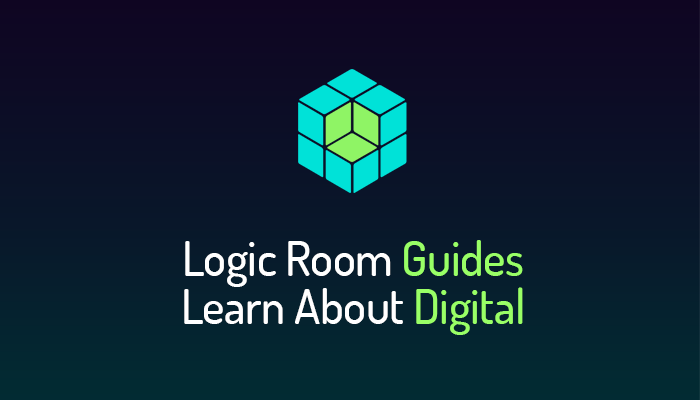
<style>
.page{position:relative;width:700px;height:400px}
.page>*{position:absolute;margin:0}
.t1{font:48px/48px "Dosis-Medium";letter-spacing:-0.01em;color:#ffffff}
.t2{font:48px/48px "Dosis-Medium";letter-spacing:-0.01em;color:#99ff66}
</style>
<div class="page">
<p class="t1" style="left:184px;top:240px;width:339px;height:95px;text-align:center">Logic Room <span class="t2">Guides<br></span>Learn About <span class="t2">Digital</span></p>
</div>
